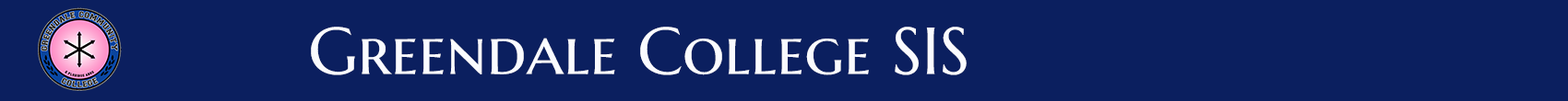
<style>
.page{position:relative;width:1568px;height:101px;background:#0b1f5f}
.page>*{position:absolute;margin:0}
.t1{font:66.4px "MarcellusSC-Regular";color:#fafbff}
</style>
<div class="page">
<p class="t1" style="left:311px;top:27px;width:656px;height:49px">Greendale College SIS</p>
</div>
